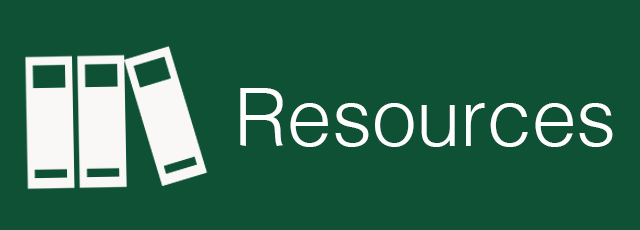
<style>
.page{position:relative;width:640px;height:230px;background:#0f5135}
.page>*{position:absolute;margin:0}
.t1{font:80px "Helvetica-Light";color:#fefefe}
</style>
<div class="page">
<p class="t1" style="left:240px;top:88px;width:373px;height:59px">Resources</p>
</div>
